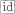
<style>
.page{position:relative;width:15px;height:14px;background:#ffffff}
.page>*{position:absolute;margin:0}
.t1{font:12px "Georgia";color:#505050}
</style>
<div class="page">
<p class="t1" style="left:3px;top:2px;width:10px;height:10px">id</p>
</div>
